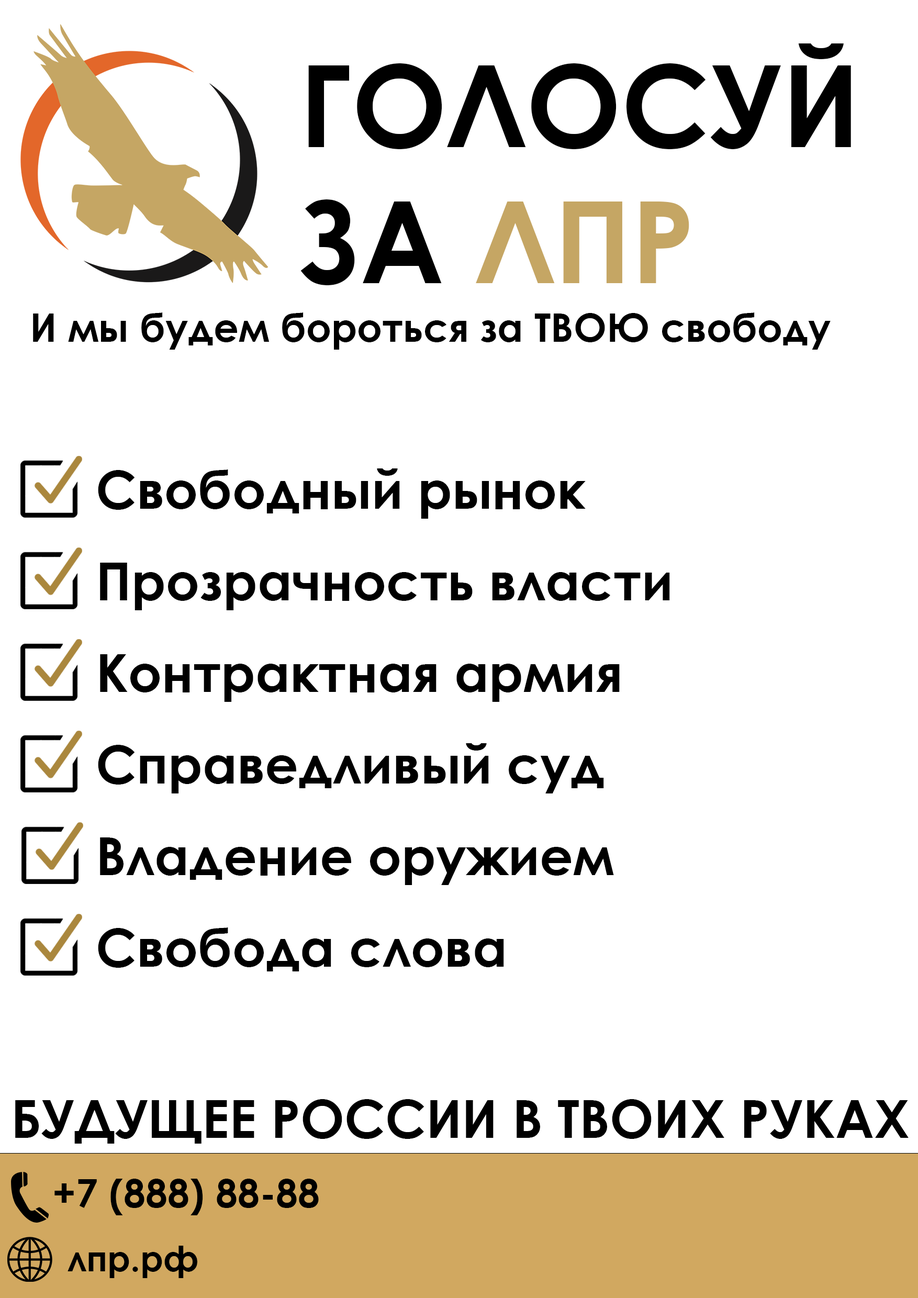
<style>
.page{position:relative;width:918px;height:1298px;background:#ffffff}
.page>*{position:absolute;margin:0}
.t1{font:113.4px "CenturyGothic-Bold";color:#000000}
.t2{font:113.4px "CenturyGothic-Bold";color:#c5a664}
.t3{font:39.3px "CenturyGothic-Bold";color:#000000}
.t4{font:52.4px "CenturyGothic-Bold";color:#000000}
.t5{font:34.9px "CenturyGothic-Bold";color:#000000}
</style>
<div class="page">
<p class="t1" style="left:301px;top:43px;width:550px;height:242px">ГОЛОСУЙ ЗА <span class="t2">ЛПР</span></p>
<p class="t3" style="left:33px;top:313px;width:798px;height:37px">И мы будем бороться за ТВОЮ свободу</p>
<p class="t4" style="left:98px;top:469px;width:488px;height:50px">Свободный рынок</p>
<p class="t4" style="left:100px;top:563px;width:570px;height:47px">Прозрачность власти</p>
<p class="t4" style="left:100px;top:654px;width:520px;height:48px">Контрактная армия</p>
<p class="t4" style="left:98px;top:743px;width:506px;height:51px">Справедливый суд</p>
<p class="t4" style="left:100px;top:838px;width:514px;height:47px">Владение оружием</p>
<p class="t4" style="left:98px;top:928px;width:406px;height:44px">Свобода слова</p>
<p class="t4" style="left:15px;top:1100px;width:894px;height:44px">БУДУЩЕЕ РОССИИ В ТВОИХ РУКАХ</p>
<p class="t3" style="left:54px;top:1179px;width:265px;height:37px">+7 (888) 88-88</p>
<p class="t5" style="left:68px;top:1246px;width:129px;height:33px">лпр.рф</p>
</div>
